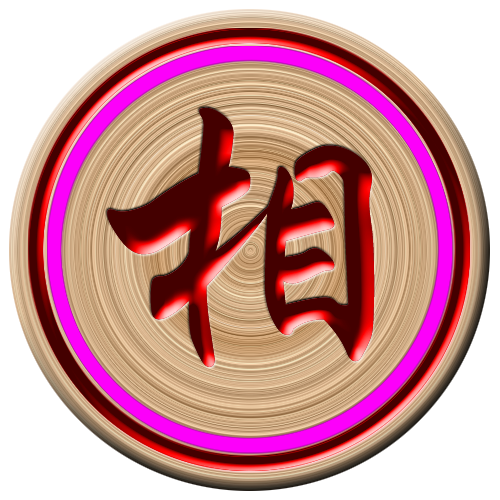
<style>
.page{position:relative;width:500px;height:500px;background:#ffffff}
.page>*{position:absolute;margin:0}
.t1{font:360px "STXingkai"}
</style>
<div class="page">
<p class="t1" style="left:107px;top:107px;width:268px;height:260px">相</p>
</div>
